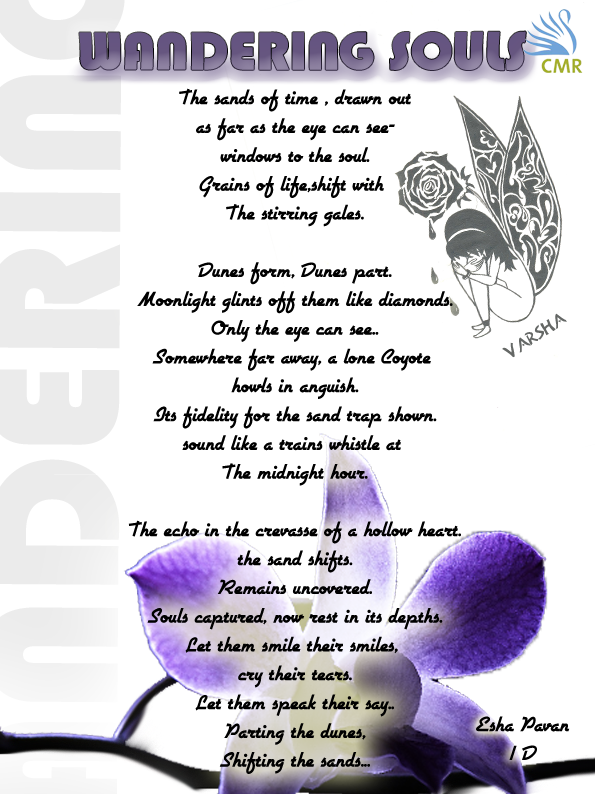
<style>
.page{position:relative;width:595px;height:794px;background:#ffffff}
.page>*{position:absolute;margin:0}
.t1{font:56px "Bauhaus93";color:#665680}
.t2{font:24px "Airstream";color:#000000}
.t3{font:17.7px "AlanDen";color:#656866}
</style>
<div class="page">
<p class="t1" style="left:79px;top:31px;width:447px;height:40px">WANDERING SOULS</p>
<p class="t2" style="left:128px;top:88px;width:333px;height:686px;text-align:center">The sands of time , drawn out<br>as far as the eye can see-<br>windows to the soul.<br>Grains of life,shift with <br>The stirring gales.<br><br>Dunes form, Dunes part.<br>Moonlight glints off them like diamonds.<br>Only the eye can see..<br>Somewhere far away, a lone Coyote <br>howls in anguish.<br>Its fidelity for the sand trap shown.<br>sound like a trains whistle at <br>The midnight hour.<br><br>The echo in the crevasse of a hollow heart.<br>the sand shifts.<br>Remains uncovered.<br>Souls captured, now rest in its depths.<br>Let them smile their smiles, <br>cry their tears.<br>Let them speak their say..<br>Parting the dunes,<br>Shifting the sands...</p>
<p class="t3" style="left:502px;top:313px;width:65px;height:45px;rotate:-33deg">varsha</p>
<p class="t2" style="left:476px;top:716px;width:94px;height:44px;text-align:center">Esha Pavan<br>1 D</p>
</div>
